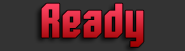
<style>
.page{position:relative;width:185px;height:51px;background:#333333}
.page>*{position:absolute;margin:0}
.t1{font:47.9px "Whitestone-Bold"}
</style>
<div class="page">
<p class="t1" style="left:41px;top:3px;width:103px;height:44px">Ready</p>
</div>
